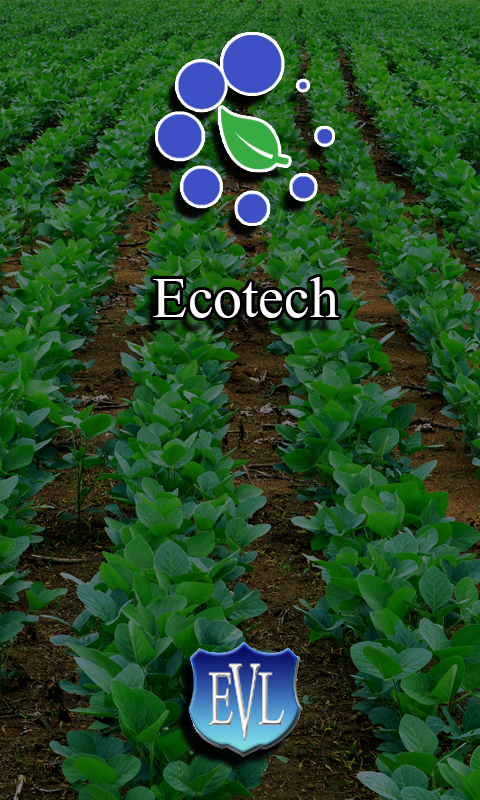
<style>
.page{position:relative;width:480px;height:800px}
.page>*{position:absolute;margin:0}
.t1{font:72px "Aparajita";color:#fefefe}
</style>
<div class="page">
<p class="t1" style="left:153px;top:277px;width:186px;height:41px">Ecotech</p>
</div>
